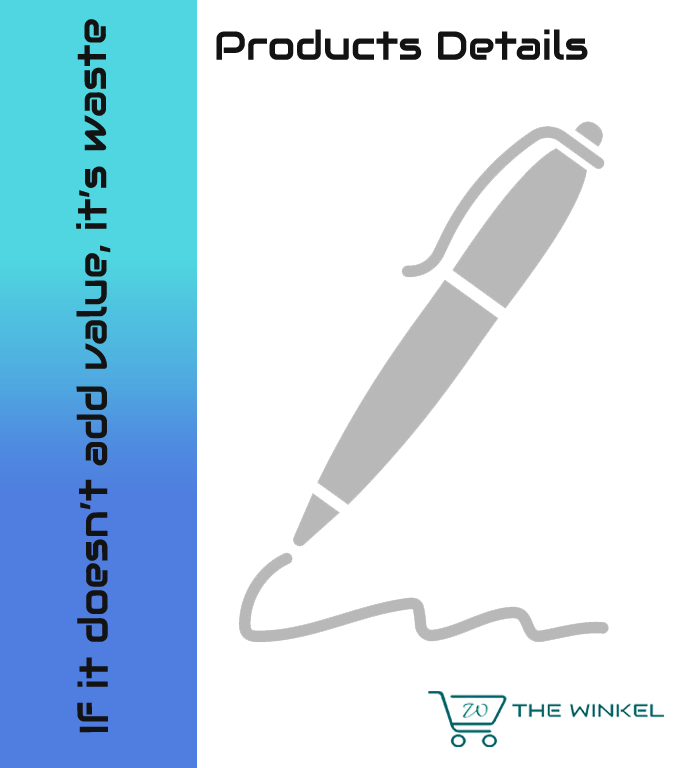
<style>
.page{position:relative;width:683px;height:768px;background:#ffffff}
.page>*{position:absolute;margin:0}
.t1{font:40px "Audiowide-Regular";color:#131313}
.t2{font:40.1px "Audiowide-Regular";color:#131313}
</style>
<div class="page">
<p class="t1" style="left:76px;top:19px;width:35px;height:714px;rotate:-90deg">If it doesn’t add value, it’s waste</p>
<p class="t2" style="left:216px;top:29px;width:372px;height:31px">Products Details</p>
</div>
